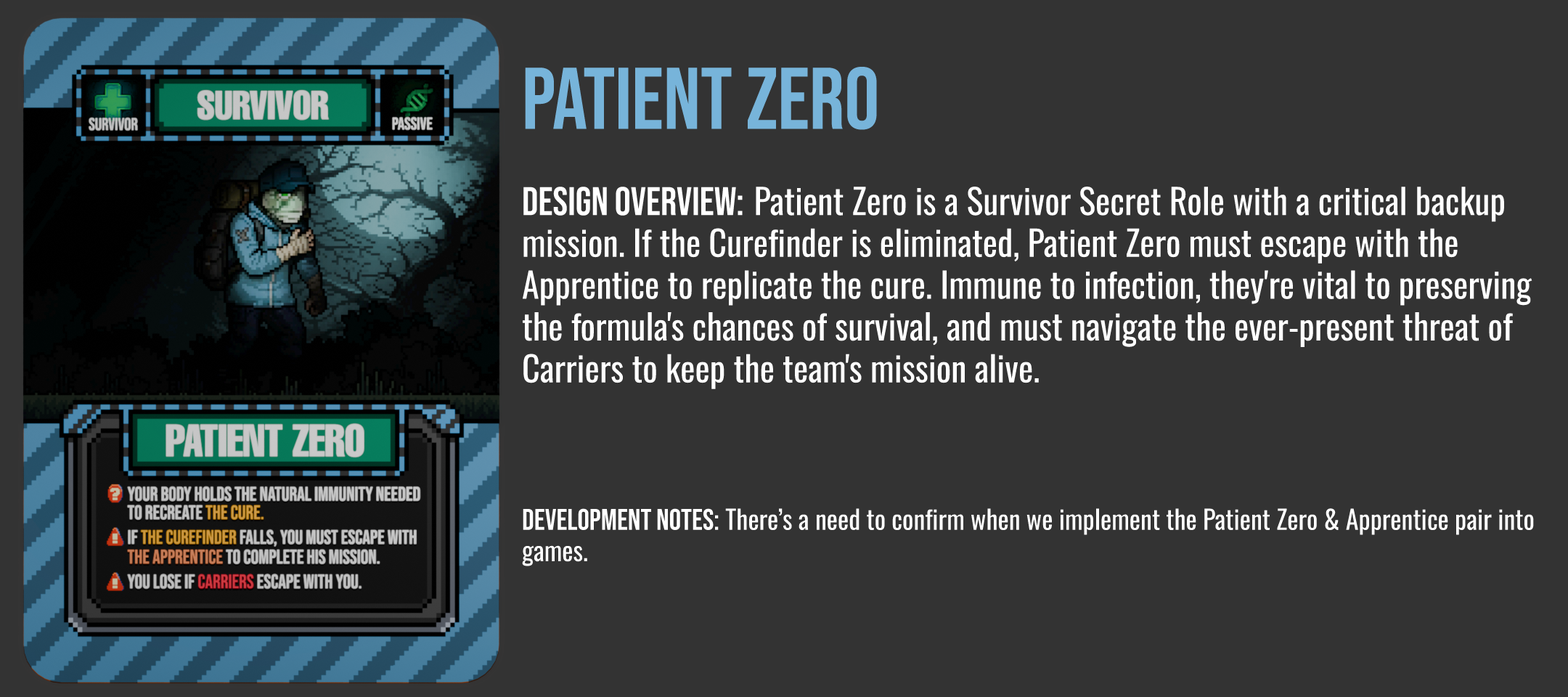
<style>
.page{position:relative;width:1568px;height:697px;background:#333333}
.page>*{position:absolute;margin:0}
.t1{font:87.1px "BebasNeue-Regular";color:#77b4da}
.t2{font:34.8px "Oswald-Regular";color:#ffffff}
.t3{font:39.9px "BebasNeue-Regular";color:#ffffff}
.t4{font:26.1px "Oswald-Regular";color:#ffffff}
.t5{font:29.8px "BebasNeue-Regular";color:#ffffff}
</style>
<div class="page">
<p class="t1" style="left:525px;top:67px;width:352px;height:63px">PATIENT ZERO</p>
<p class="t2" style="left:523px;top:187px;width:1009px;height:202px"><span class="t3">Design Overview: </span>Patient Zero is a Survivor Secret Role with a critical backup mission. If the Curefinder is eliminated, Patient Zero must escape with the Apprentice to replicate the cure. Immune to infection, they're vital to preserving the formula's chances of survival, and must navigate the ever-present threat of Carriers to keep the team's mission alive.</p>
<p class="t4" style="left:522px;top:508px;width:1012px;height:58px"><span class="t5">development Notes:</span> There’s a need to confirm when we implement the Patient Zero &amp; Apprentice pair into games.</p>
</div>
